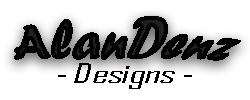
<style>
.page{position:relative;width:250px;height:100px;background:#ffffff}
.page>*{position:absolute;margin:0}
.t1{font:44.4px "ForteMT";color:#040000;font-style:italic;scale:1.11 1}
.t2{font:26px "AgencyFB-Reg";color:#040000;font-style:italic;scale:1.55 1}
</style>
<div class="page">
<p class="t1" style="left:14px;top:16px;width:227px;height:45px">AlanDenz</p>
<p class="t2" style="left:58px;top:63px;width:134px;height:26px">- Designs -</p>
</div>
